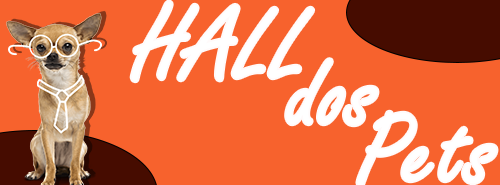
<style>
.page{position:relative;width:500px;height:185px;background:#f7622d}
.page>*{position:absolute;margin:0}
.t1{font:110.3px "FreestyleScript-Regular";letter-spacing:-0.01em;color:#ffffff;font-weight:bold}
</style>
<div class="page">
<p class="t1" style="left:131px;top:1px;width:183px;height:81px">HALL</p>
<p class="t1" style="left:286px;top:59px;width:92px;height:67px">dos</p>
<p class="t1" style="left:357px;top:111px;width:140px;height:76px">Pets</p>
</div>
